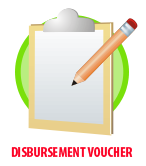
<style>
.page{position:relative;width:146px;height:166px;background:#ffffff}
.page>*{position:absolute;margin:0}
.t1{font:14px "MyriadPro-BoldCond";color:#fc0326}
</style>
<div class="page">
<p class="t1" style="left:11px;top:147px;width:122px;height:10px">DISBURSEMENT VOUCHER</p>
</div>
